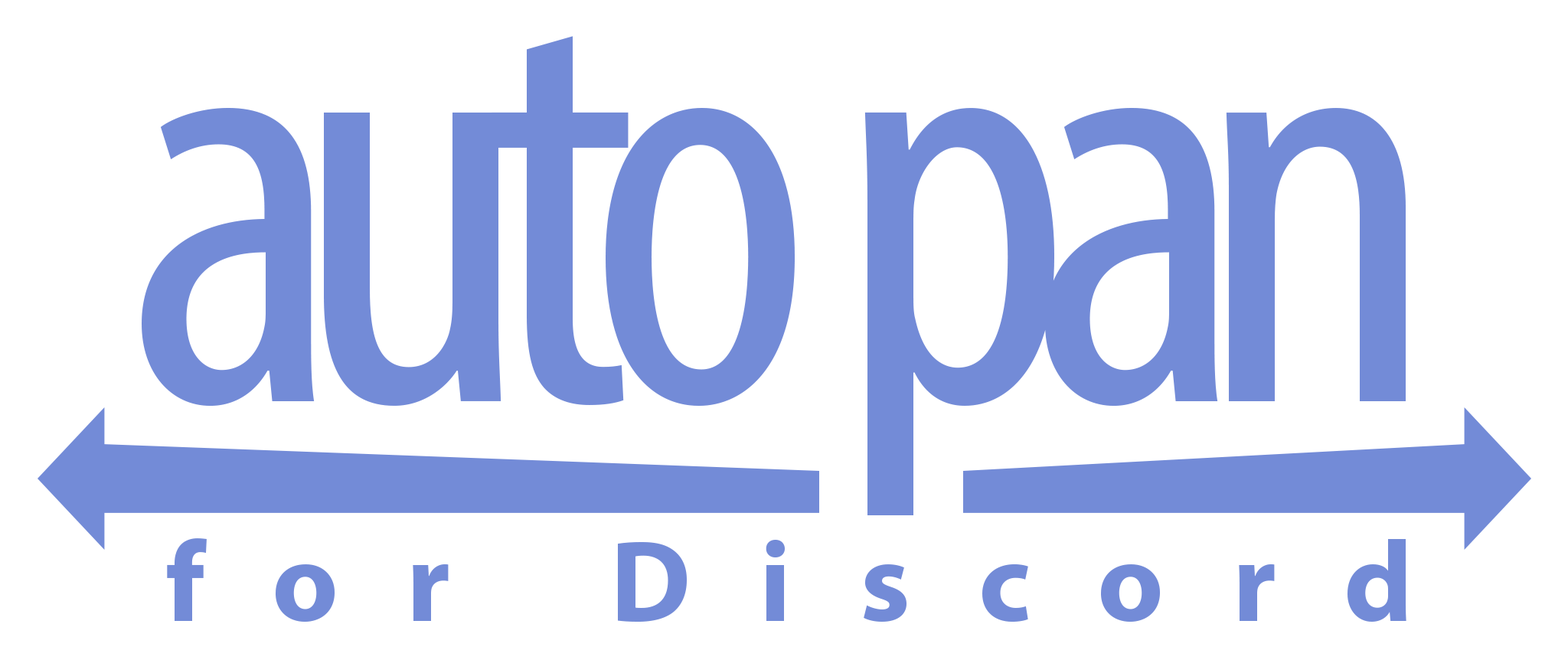
<style>
.page{position:relative;width:1568px;height:660px;background:#ffffff}
.page>*{position:absolute;margin:0}
.t1{font:595.9px "MyriadPro-Cond";letter-spacing:-0.06em;color:#738bd7}
.t2{font:115.6px "MyriadPro-Bold";letter-spacing:0.59em;color:#738bd7}
</style>
<div class="page">
<p class="t1" style="left:142px;top:36px;width:1264px;height:479px">auto pan</p>
<p class="t2" style="left:167px;top:538px;width:1239px;height:84px">for Discord</p>
</div>
